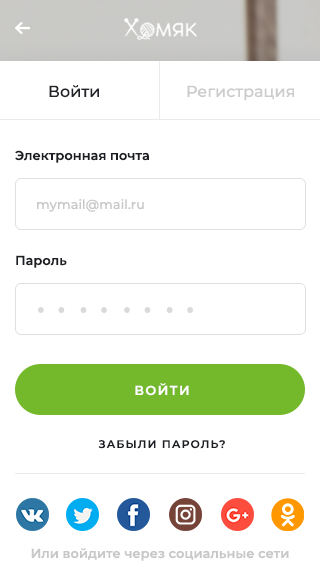
<style>
.page{position:relative;width:320px;height:585px;background:#ffffff}
.page>*{position:absolute;margin:0}
.t1{font:16px "Montserrat-Medium";color:#222328}
.t2{font:16px "Montserrat-Medium";color:#cccccc}
.t3{font:13px "Montserrat-SemiBold";color:#1c1e23}
.t4{font:13px "Montserrat-Medium";color:#c8c8c8}
.t5{font:13px "Montserrat-SemiBold";letter-spacing:0.1em;color:#ffffff;text-transform:uppercase}
.t6{font:11px "Montserrat-SemiBold";letter-spacing:0.1em;color:#1c1e23;text-transform:uppercase}
.t7{font:13px "Montserrat-SemiBold";color:#c8c8c8}
</style>
<div class="page">
<p class="t1" style="left:49px;top:85px;width:50px;height:13px">Войти</p>
<p class="t2" style="left:187px;top:85px;width:107px;height:16px">Регистрация</p>
<p class="t3" style="left:15px;top:150px;width:134px;height:13px">Электронная почта</p>
<p class="t4" style="left:37px;top:199px;width:107px;height:13px">mymail@mail.ru</p>
<p class="t3" style="left:16px;top:255px;width:51px;height:13px">Пароль</p>
<p class="t5" style="left:135px;top:383px;width:54px;height:13px">войти</p>
<p class="t6" style="left:98px;top:440px;width:127px;height:9px">Забыли пароль?</p>
<p class="t7" style="left:31px;top:548px;width:258px;height:13px">Или войдите через социальные сети</p>
</div>
